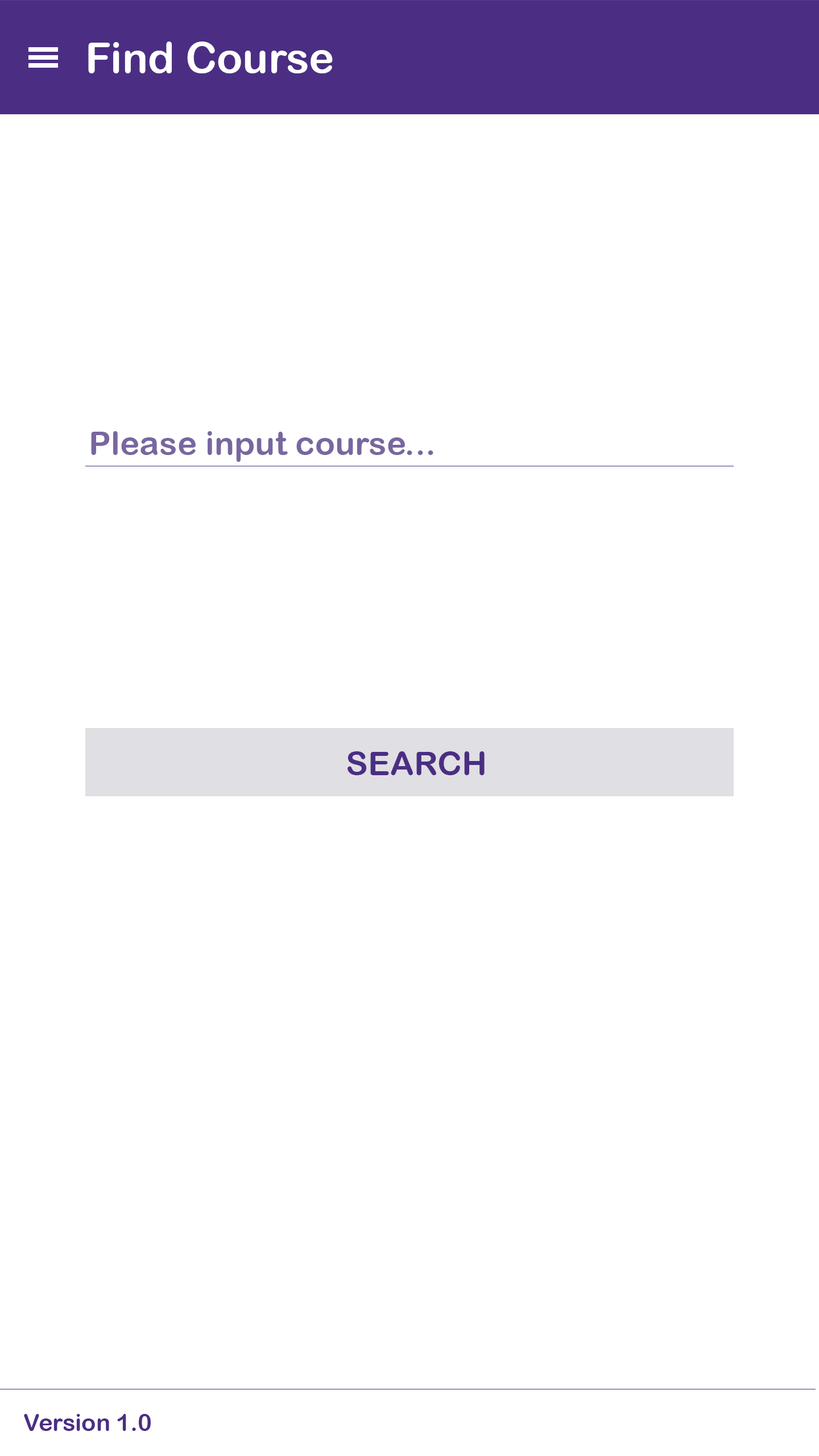
<style>
.page{position:relative;width:819px;height:1456px;background:#ffffff}
.page>*{position:absolute;margin:0}
.t1{font:42.7px "ArialRoundedMTBold";color:#ffffff}
.t2{font:33.2px "ArialRoundedMTBold";color:#78679f}
.t3{font:33.2px "ArialRoundedMTBold";color:#4b2e83}
.t4{font:23.7px "ArialRoundedMTBold";color:#4b2e83}
</style>
<div class="page">
<p class="t1" style="left:88px;top:42px;width:245px;height:31px">Find Course</p>
<p class="t2" style="left:91px;top:431px;width:342px;height:31px">Please input course...</p>
<p class="t3" style="left:348px;top:751px;width:137px;height:24px">SEARCH</p>
<p class="t4" style="left:24px;top:1414px;width:127px;height:17px">Version 1.0</p>
</div>
